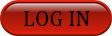
<style>
.page{position:relative;width:112px;height:36px}
.page>*{position:absolute;margin:0}
.t1{font:22.5px "Cambria";color:#000000}
</style>
<div class="page">
<p class="t1" style="left:24px;top:11px;width:66px;height:15px">LOG IN</p>
</div>
